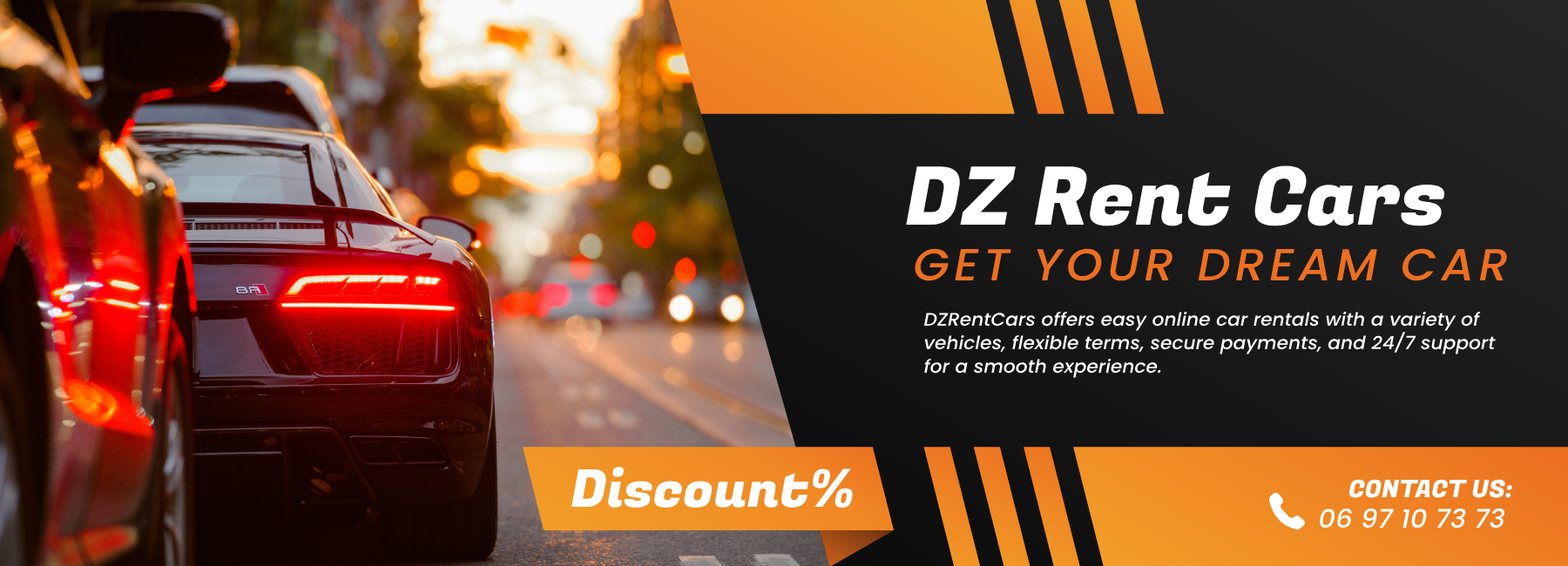
<style>
.page{position:relative;width:1568px;height:566px}
.page>*{position:absolute;margin:0}
.t1{font:80.9px "FugazOne-Regular";color:#ffffff;scale:1.04 1}
.t2{font:44.9px "Poppins-MediumItalic";letter-spacing:0.1em;color:#ed6f21;scale:1.04 1}
.t3{font:18.2px/23.6px "Poppins-MediumItalic";color:#ffffff;scale:1.04 1}
.t4{font:52px "FugazOne-Regular";color:#ffffff;scale:1.04 1}
.t5{font:24.2px "FugazOne-Regular";color:#ffffff;scale:1.04 1}
.t6{font:25.7px "Poppins-MediumItalic";color:#ffffff;scale:1.04 1}
</style>
<div class="page">
<p class="t1" style="left:906px;top:166px;width:539px;height:60px">DZ Rent Cars</p>
<p class="t2" style="left:915px;top:248px;width:592px;height:33px">GET YOUR DREAM CAR</p>
<p class="t3" style="left:923px;top:312px;width:573px;height:66px">DZRentCars offers easy online car rentals with a variety of vehicles, flexible terms, secure payments, and 24/7 support for a smooth experience.</p>
<p class="t4" style="left:571px;top:467px;width:282px;height:41px">Discount%</p>
<p class="t5" style="left:1349px;top:479px;width:163px;height:19px">CONTACT US:</p>
<p class="t6" style="left:1319px;top:508px;width:186px;height:21px">06 97 10 73 73</p>
</div>
